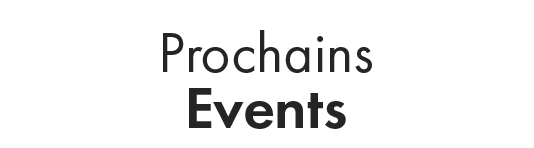
<style>
.page{position:relative;width:534px;height:148px;background:#ffffff}
.page>*{position:absolute;margin:0}
.t1{font:57.9px/56.7px "FuturaPT-Book";color:#252525}
.t2{font:60.7px/56.7px "FuturaPT-Demi";color:#252525}
</style>
<div class="page">
<p class="t1" style="left:163px;top:30px;width:209px;height:99px;text-align:center">Prochains<br><span class="t2">Events</span></p>
</div>
